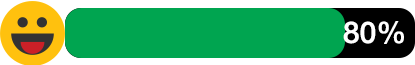
<style>
.page{position:relative;width:415px;height:65px;background:#00a550}
.page>*{position:absolute;margin:0}
.t1{font:30px "HelveticaNeueCyr-Medium";color:#ffffff}
</style>
<div class="page">
<p class="t1" style="left:343px;top:21px;width:61px;height:23px">80%</p>
</div>
